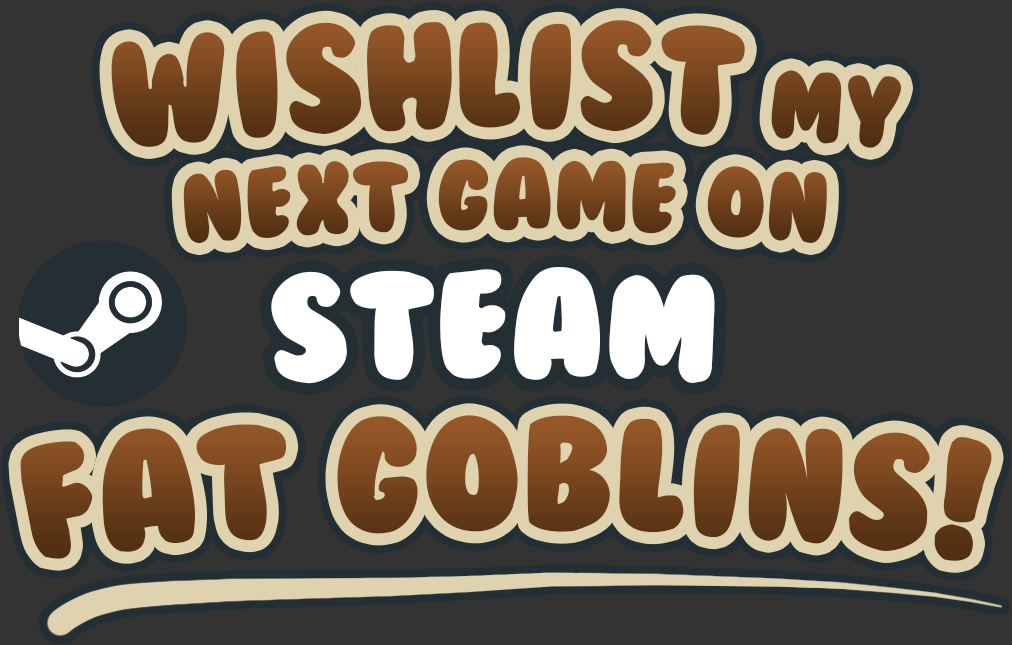
<style>
.page{position:relative;width:1012px;height:645px;background:#333333}
.page>*{position:absolute;margin:0}
.t1{font:140px "BubbleGum"}
.t2{font:92px "BubbleGum"}
.t3{font:140px "BubbleGum";color:#ffffff}
.t4{font:150px "BubbleGum"}
</style>
<div class="page">
<p class="t1" style="left:111px;top:20px;width:790px;height:128px">Wishlist<span class="t2"> my</span></p>
<p class="t2" style="left:183px;top:157px;width:644px;height:87px">NEXT GAME ON</p>
<p class="t3" style="left:271px;top:267px;width:444px;height:117px">STEAM</p>
<p class="t4" style="left:20px;top:415px;width:972px;height:146px">FAT GOBLINS!</p>
</div>
